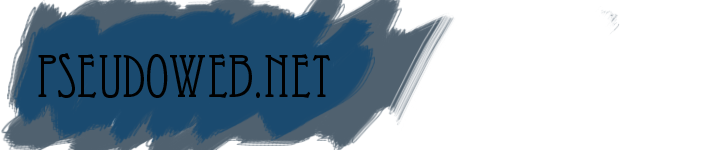
<style>
.page{position:relative;width:720px;height:150px;background:#ffffff}
.page>*{position:absolute;margin:0}
.t1{font:60px "EccentricStd";color:#000000}
</style>
<div class="page">
<p class="t1" style="left:38px;top:53px;width:293px;height:45px">Pseudoweb.net</p>
</div>
